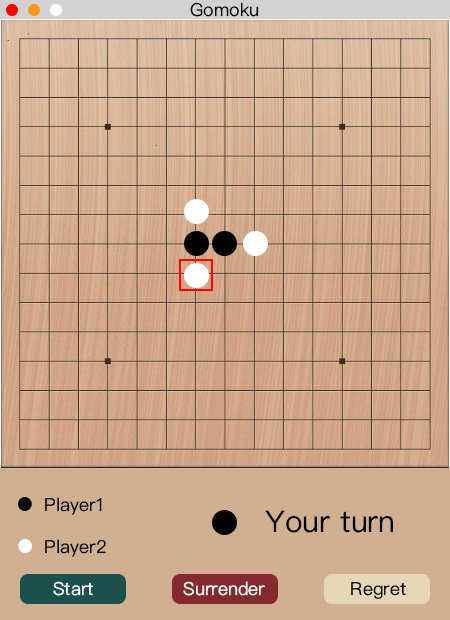
<style>
.page{position:relative;width:450px;height:620px;background:#d0b090}
.page>*{position:absolute;margin:0}
.t1{font:18px "PingFangSC-Regular";color:#000000}
.t2{font:30px "PingFangSC-Regular";color:#000000}
.t3{font:18px "PingFangSC-Regular";color:#ffffff}
</style>
<div class="page">
<p class="t1" style="left:190px;top:2px;width:69px;height:15px">Gomoku</p>
<p class="t1" style="left:45px;top:497px;width:57px;height:18px">Player1</p>
<p class="t2" style="left:265px;top:510px;width:128px;height:23px">Your turn</p>
<p class="t1" style="left:45px;top:539px;width:61px;height:18px">Player2</p>
<p class="t3" style="left:53px;top:581px;width:40px;height:15px">Start</p>
<p class="t3" style="left:183px;top:581px;width:82px;height:15px">Surrender</p>
<p class="t1" style="left:351px;top:582px;width:55px;height:17px">Regret</p>
</div>
